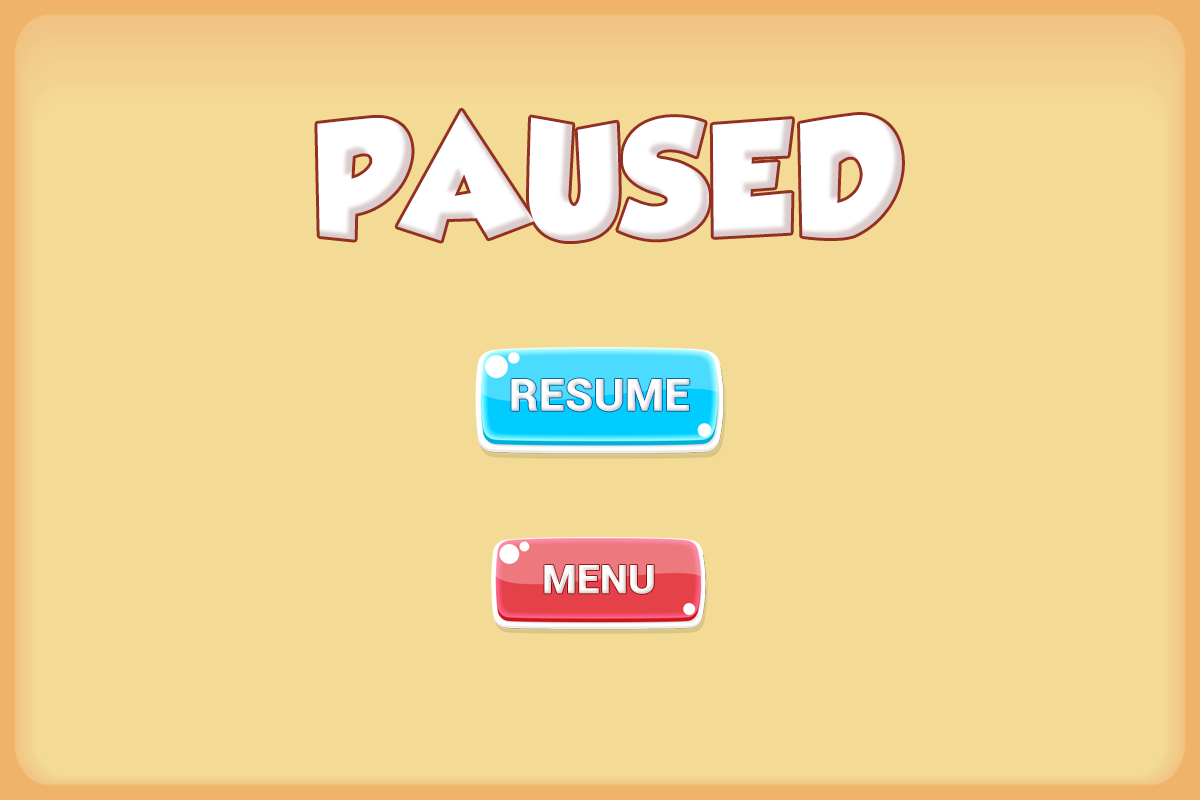
<style>
.page{position:relative;width:1200px;height:800px;background:#f3db95}
.page>*{position:absolute;margin:0}
.t1{font:143.3px "GROBOLD";letter-spacing:0.01em;color:#ffffff}
.t2{font:44.9px "Roboto-Black";letter-spacing:0.01em;color:#ffffff}
.t3{font:39.6px "Roboto-Black";letter-spacing:0.01em;color:#ffffff}
</style>
<div class="page">
<p class="t1" style="left:317px;top:110px;width:585px;height:131px">PAUSED</p>
<p class="t2" style="left:511px;top:378px;width:179px;height:34px">RESUME</p>
<p class="t3" style="left:544px;top:565px;width:110px;height:29px">MENU</p>
</div>
